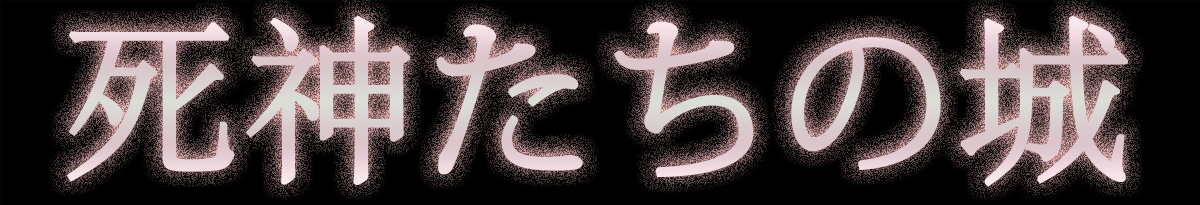
<style>
.page{position:relative;width:1200px;height:205px;background:#000000}
.page>*{position:absolute;margin:0}
.t1{font:175px "AdobeSongStd-Light";letter-spacing:-0.005em;color:#dbd0d2;font-weight:bold}
</style>
<div class="page">
<p class="t1" style="left:67px;top:15px;width:1061px;height:172px">死神たちの城</p>
</div>
